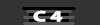
<style>
.page{position:relative;width:100px;height:25px;background:#333333}
.page>*{position:absolute;margin:0}
.t1{font:14.8px "MyriadPro-Bold";letter-spacing:0.185em;color:#ffffff;font-weight:bold;scale:1.45 1}
</style>
<div class="page">
<p class="t1" style="left:33px;top:10px;width:30px;height:12px">C4</p>
</div>
